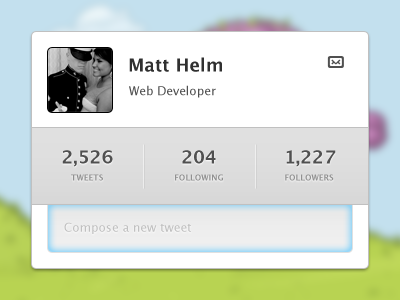
<style>
.page{position:relative;width:400px;height:300px;background:#ffffff}
.page>*{position:absolute;margin:0}
.t1{font:18px "LucidaGrande-Bold";color:#303030}
.t2{font:12px "LucidaGrande";color:#505050}
.t3{font:18px "LucidaGrande-Bold";color:#505050}
.t4{font:8px "LucidaGrande-Bold";color:#909090;text-transform:uppercase}
.t5{font:12px "LucidaGrande";color:#c0c0c0}
</style>
<div class="page">
<p class="t1" style="left:129px;top:57px;width:93px;height:15px">Matt Helm</p>
<p class="t2" style="left:129px;top:85px;width:87px;height:13px">Web Developer</p>
<p class="t3" style="left:62px;top:150px;width:51px;height:17px">2,526</p>
<p class="t3" style="left:182px;top:150px;width:34px;height:14px">204</p>
<p class="t3" style="left:286px;top:150px;width:50px;height:17px">1,227</p>
<p class="t4" style="left:71px;top:174px;width:32px;height:7px">Tweets</p>
<p class="t4" style="left:175px;top:174px;width:48px;height:7px">Following</p>
<p class="t4" style="left:285px;top:174px;width:49px;height:7px">Followers</p>
<p class="t5" style="left:64px;top:222px;width:127px;height:12px">Compose a new tweet</p>
</div>
